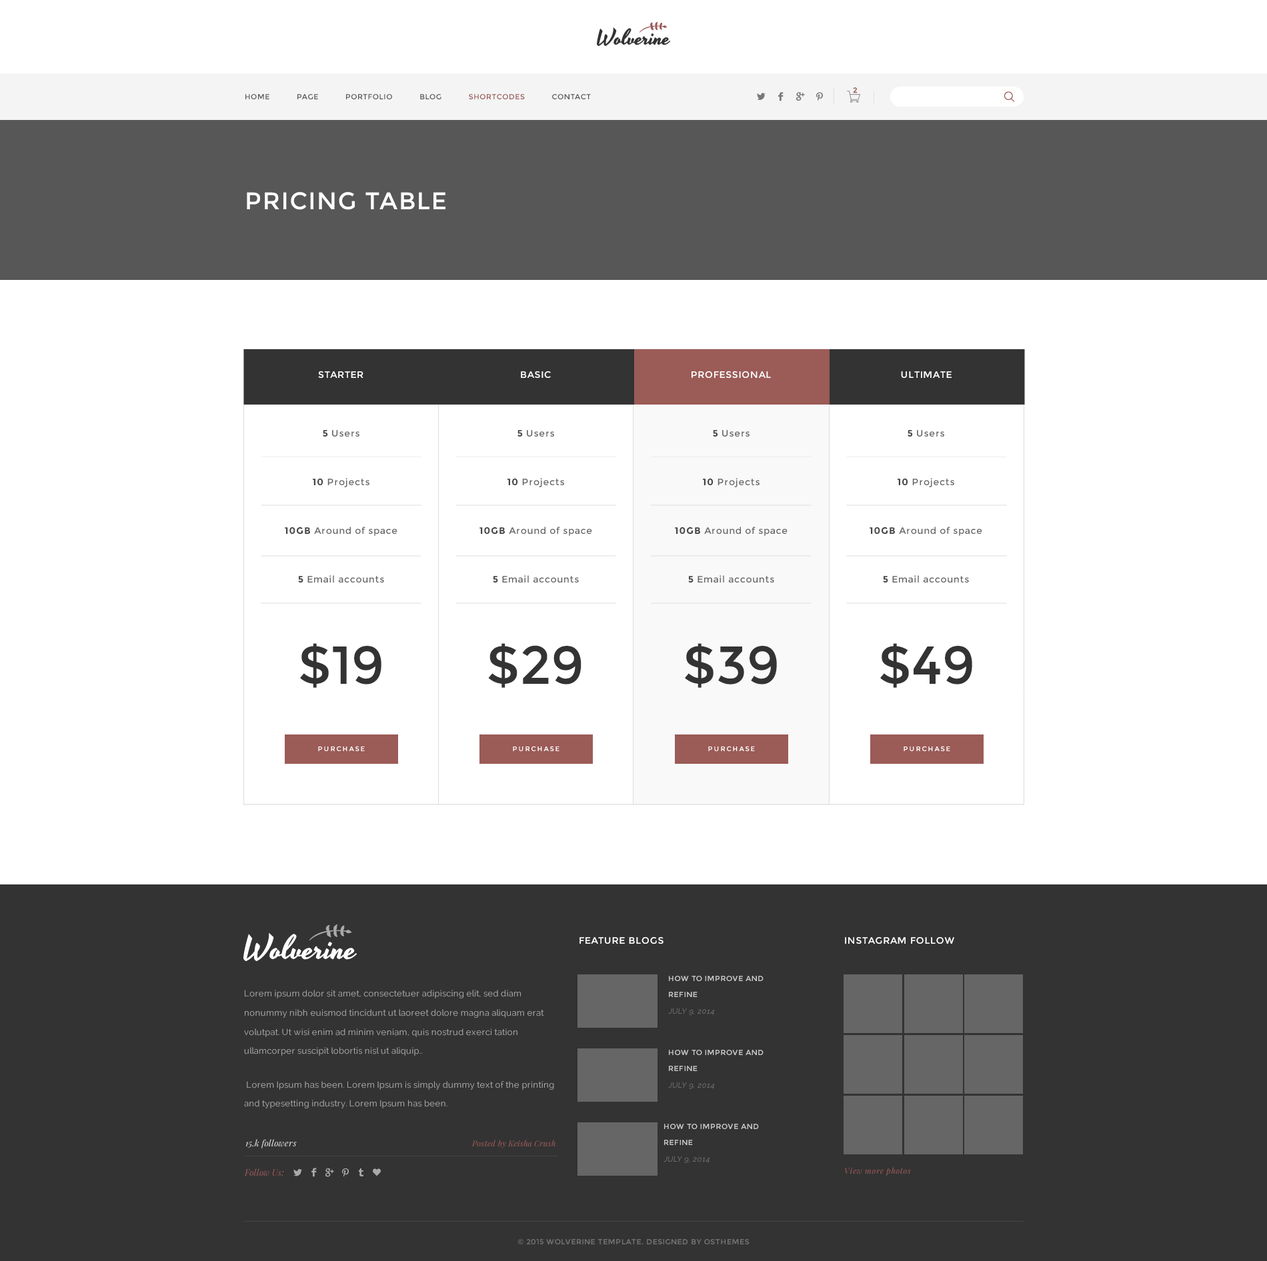
<style>
.page{position:relative;width:1267px;height:1261px;background:#ffffff}
.page>*{position:absolute;margin:0}
.t1{font:7.3px "Montserrat-Regular";color:#9a5a58;font-weight:bold}
.t2{font:7.3px "Montserrat-Regular";letter-spacing:0.05em;color:#535353}
.t3{font:7.3px "Montserrat-Regular";letter-spacing:0.05em;color:#995958}
.t4{font:24px "Montserrat-Regular";letter-spacing:0.05em;color:#ffffff}
.t5{font:9.3px "Montserrat-Regular";letter-spacing:0.05em;color:#ffffff}
.t6{font:9.3px/24.3px "Montserrat-Regular";letter-spacing:0.05em;color:#666666}
.t7{font:9.3px/24.3px "Montserrat-Bold";letter-spacing:0.05em;color:#444444}
.t8{font:53.3px "Montserrat-Regular";color:#333333}
.t9{font:6.7px "Montserrat-Regular";letter-spacing:0.2em;color:#ffffff}
.t10{font:7.3px/16.1px "Montserrat-Regular";letter-spacing:0.05em;color:#cccccc}
.t11{font:7.3px/16.1px "Raleway-Regular";letter-spacing:0.05em;color:#777777;font-style:italic}
.t12{font:8.7px/19.1px "Raleway-Regular";letter-spacing:0.02em;color:#aaaaaa}
.t13{font:8.7px "PlayfairDisplay-Italic";letter-spacing:0.02em;color:#dddddd}
.t14{font:8px "PlayfairDisplay-Italic";letter-spacing:0.02em;color:#9a5a58}
.t15{font:8.7px "PlayfairDisplay-Italic";letter-spacing:0.02em;color:#995958}
.t16{font:8px "PlayfairDisplay-Italic";letter-spacing:0.05em;color:#9a5a58}
.t17{font:7.3px "Montserrat-Regular";letter-spacing:0.05em;color:#777777}
</style>
<div class="page">
<p class="t1" style="left:853px;top:87px;width:4px;height:6px">2</p>
<p class="t2" style="left:245px;top:94px;width:346px;height:5px">HOME      PAGE      PORTFOLIO      BLOG      <span class="t3">SHORTCODES</span>      CONTACT</p>
<p class="t4" style="left:247px;top:192px;width:198px;height:18px">PRICING TABLE</p>
<p class="t5" style="left:318px;top:371px;width:45px;height:7px">STARTER</p>
<p class="t5" style="left:521px;top:371px;width:30px;height:7px">BASIC</p>
<p class="t5" style="left:691px;top:371px;width:80px;height:7px">PROFESSIONAL</p>
<p class="t5" style="left:901px;top:371px;width:50px;height:7px">ULTIMATE</p>
<p class="t6" style="left:285px;top:430px;width:112px;height:153px;text-align:center"><span class="t7">5 </span>Users<br><br><span class="t7">10 </span>Projects<br><br><span class="t7">10GB </span>Around of space<br><br><span class="t7">5 </span>Email accounts</p>
<p class="t6" style="left:479px;top:430px;width:113px;height:153px;text-align:center"><span class="t7">5 </span>Users<br><br><span class="t7">10 </span>Projects<br><br><span class="t7">10GB </span>Around of space<br><br><span class="t7">5 </span>Email accounts</p>
<p class="t6" style="left:675px;top:430px;width:112px;height:153px;text-align:center"><span class="t7">5 </span>Users<br><br><span class="t7">10 </span>Projects<br><br><span class="t7">10GB </span>Around of space<br><br><span class="t7">5 </span>Email accounts</p>
<p class="t6" style="left:869px;top:430px;width:113px;height:153px;text-align:center"><span class="t7">5 </span>Users<br><br><span class="t7">10 </span>Projects<br><br><span class="t7">10GB </span>Around of space<br><br><span class="t7">5 </span>Email accounts</p>
<p class="t8" style="left:300px;top:643px;width:81px;height:45px">$19</p>
<p class="t8" style="left:488px;top:643px;width:93px;height:45px">$29</p>
<p class="t8" style="left:685px;top:643px;width:92px;height:45px">$39</p>
<p class="t8" style="left:880px;top:643px;width:92px;height:45px">$49</p>
<p class="t9" style="left:318px;top:746px;width:47px;height:5px">PURCHASE</p>
<p class="t9" style="left:513px;top:746px;width:46px;height:5px">PURCHASE</p>
<p class="t9" style="left:708px;top:746px;width:47px;height:5px">PURCHASE</p>
<p class="t9" style="left:903px;top:746px;width:47px;height:5px">PURCHASE</p>
<p class="t5" style="left:579px;top:937px;width:84px;height:7px">FEATURE BLOGS</p>
<p class="t5" style="left:845px;top:937px;width:109px;height:7px">INSTAGRAM FOLLOW</p>
<p class="t10" style="left:668px;top:976px;width:95px;height:39px">HOW TO IMPROVE AND REFINE <br><span class="t11">JULY 9, 2014</span></p>
<p class="t12" style="left:244px;top:990px;width:310px;height:119px">Lorem ipsum dolor sit amet, consectetuer adipiscing elit, sed diam nonummy nibh euismod tincidunt ut laoreet dolore magna aliquam erat volutpat. Ut wisi enim ad minim veniam, quis nostrud exerci tation ullamcorper suscipit lobortis nisl ut aliquip..<br> <br> Lorem Ipsum has been. Lorem Ipsum is simply dummy text of the printing and typesetting industry. Lorem Ipsum has been.</p>
<p class="t10" style="left:668px;top:1050px;width:95px;height:39px">HOW TO IMPROVE AND REFINE <br><span class="t11">JULY 9, 2014</span></p>
<p class="t10" style="left:663px;top:1124px;width:96px;height:39px">HOW TO IMPROVE AND REFINE <br><span class="t11">JULY 9, 2014</span></p>
<p class="t13" style="left:245px;top:1139px;width:52px;height:10px">15.k followers</p>
<p class="t14" style="left:471px;top:1140px;width:84px;height:9px">Posted by Keisha Crush</p>
<p class="t15" style="left:244px;top:1169px;width:40px;height:8px">Follow Us:</p>
<p class="t16" style="left:845px;top:1167px;width:66px;height:9px">View more photos</p>
<p class="t17" style="left:517px;top:1239px;width:232px;height:6px">© 2015 WOLVERINE TEMPLATE. DESIGNED BY OSTHEMES</p>
</div>
